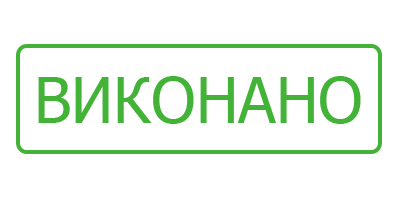
<style>
.page{position:relative;width:400px;height:200px;background:#ffffff}
.page>*{position:absolute;margin:0}
.t1{font:63.2px "Tahoma";color:#43b338}
</style>
<div class="page">
<p class="t1" style="left:38px;top:76px;width:323px;height:48px">ВИКОНАНО</p>
</div>
